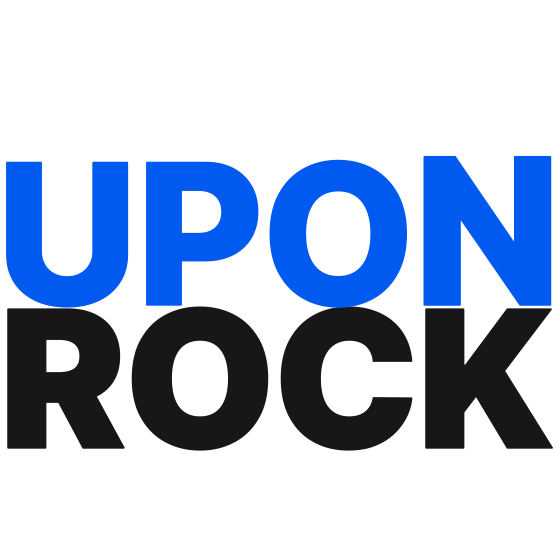
<style>
.page{position:relative;width:560px;height:560px;background:#ffffff}
.page>*{position:absolute;margin:0}
.t1{font:196px "Inter-ExtraBold";letter-spacing:-0.04em;color:#005af0;font-variant:small-caps;font-weight:bold}
.t2{font:203.8px "Inter-ExtraBold";letter-spacing:-0.04em;color:#005af0;font-variant:small-caps;font-weight:bold}
.t3{font:190.6px "Inter-Black";letter-spacing:-0.04em;color:#171717;font-variant:small-caps;font-weight:bold}
</style>
<div class="page">
<p class="t1" style="left:6px;top:155px;width:546px;height:153px">UPO<span class="t2">N</span></p>
<p class="t3" style="left:7px;top:306px;width:546px;height:145px">ROCK</p>
</div>
